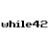
<style>
.page{position:relative;width:50px;height:50px;background:#ffffff}
.page>*{position:absolute;margin:0}
.t1{font:8.3px "BoldLEDBoard-7";color:#000000}
</style>
<div class="page">
<p class="t1" style="left:1px;top:20px;width:47px;height:8px">while42</p>
</div>
